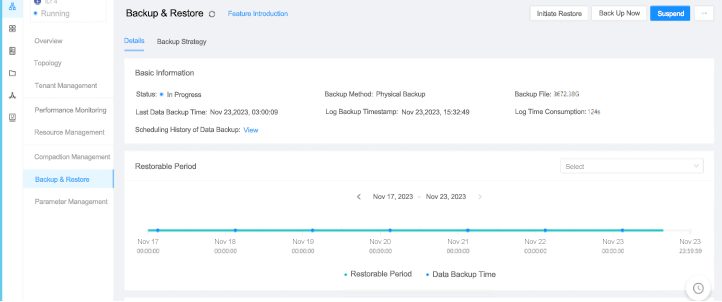
<style>
.page{position:relative;width:722px;height:302px;background:#ffffff}
.page>*{position:absolute;margin:0}
.t1{font:8px "ArialMT";letter-spacing:-0.02em;color:#bebebe}
.t2{font:10px "ArialMT";letter-spacing:-0.02em;color:#151515}
.t3{font:7px "ArialMT";letter-spacing:-0.02em;color:#56acf9}
.t4{font:7px "ArialMT";letter-spacing:-0.02em;color:#747474}
.t5{font:7px "ArialMT";letter-spacing:-0.02em;color:#ffffff}
.t6{font:7px "ArialMT";letter-spacing:-0.02em;color:#abaaaa}
.t7{font:8px "ArialMT";letter-spacing:-0.02em;color:#747474}
.t8{font:7px "ArialMT";letter-spacing:-0.02em;color:#9b9b9b}
.t9{font:7px "ArialMT";letter-spacing:-0.03em;color:#abaaaa}
.t10{font:7px "ArialMT";letter-spacing:-0.02em}
.t11{font:7px "ArialMT";letter-spacing:-0.02em;color:#7f7d7d}
</style>
<div class="page">
<p class="t1" style="left:41px;top:10px;width:29px;height:8px">Running</p>
<p class="t2" style="left:126px;top:9px;width:78px;height:10px">Backup &amp; Restore</p>
<p class="t3" style="left:228px;top:10px;width:60px;height:7px">Feature Introduction</p>
<p class="t4" style="left:537px;top:10px;width:45px;height:7px">Initiate Restore</p>
<p class="t4" style="left:599px;top:10px;width:41px;height:7px">Back Up Now</p>
<p class="t5" style="left:657px;top:10px;width:27px;height:8px">Suspend</p>
<p class="t6" style="left:34px;top:38px;width:29px;height:6px">Overview</p>
<p class="t3" style="left:124px;top:37px;width:21px;height:7px">Details</p>
<p class="t4" style="left:157px;top:38px;width:50px;height:8px">Backup Strategy</p>
<p class="t6" style="left:33px;top:60px;width:29px;height:7px">Topology</p>
<p class="t7" style="left:135px;top:69px;width:59px;height:7px">Basic Information</p>
<p class="t6" style="left:34px;top:82px;width:64px;height:8px">Tenant Management</p>
<p class="t4" style="left:136px;top:91px;width:21px;height:6px">Status:</p>
<p class="t4" style="left:167px;top:91px;width:35px;height:8px">In Progress</p>
<p class="t4" style="left:325px;top:91px;width:48px;height:7px">Backup Method:</p>
<p class="t4" style="left:376px;top:91px;width:50px;height:7px">Physical Backup</p>
<p class="t4" style="left:515px;top:91px;width:36px;height:7px">Backup File:</p>
<p class="t8" style="left:35px;top:107px;width:72px;height:7px">Performance Monitoring</p>
<p class="t4" style="left:136px;top:109px;width:71px;height:7px">Last Data Backup Time:</p>
<p class="t4" style="left:210px;top:109px;width:68px;height:7px">Nov 23,2023, 03:00:09</p>
<p class="t4" style="left:326px;top:108px;width:72px;height:8px">Log Backup Timestamp:</p>
<p class="t4" style="left:402px;top:109px;width:68px;height:7px">Nov 23,2023, 15:32:49</p>
<p class="t4" style="left:515px;top:108px;width:71px;height:8px">Log Time Consumption:</p>
<p class="t4" style="left:135px;top:126px;width:105px;height:8px">Scheduling History of Data Backup:</p>
<p class="t6" style="left:34px;top:129px;width:71px;height:8px">Resource Management</p>
<p class="t3" style="left:243px;top:127px;width:16px;height:6px">View</p>
<p class="t9" style="left:34px;top:154px;width:77px;height:7px">Compaction Management</p>
<p class="t7" style="left:135px;top:163px;width:61px;height:7px">Restorable Period</p>
<p class="t10" style="left:565px;top:164px;width:19px;height:5px">Select</p>
<p class="t3" style="left:35px;top:176px;width:55px;height:8px">Backup &amp; Restore</p>
<p class="t6" style="left:35px;top:198px;width:73px;height:8px">Parameter Management</p>
<p class="t11" style="left:373px;top:193px;width:40px;height:7px">Nov 17, 2023</p>
<p class="t11" style="left:426px;top:193px;width:40px;height:7px">Nov 23, 2023</p>
<p class="t11" style="left:138px;top:239px;width:21px;height:5px">Nov 17</p>
<p class="t11" style="left:215px;top:239px;width:21px;height:5px">Nov 18</p>
<p class="t11" style="left:293px;top:239px;width:21px;height:5px">Nov 19</p>
<p class="t11" style="left:370px;top:239px;width:21px;height:5px">Nov 20</p>
<p class="t11" style="left:448px;top:239px;width:20px;height:5px">Nov 21</p>
<p class="t11" style="left:525px;top:239px;width:21px;height:5px">Nov 22</p>
<p class="t11" style="left:603px;top:239px;width:21px;height:5px">Nov 23</p>
<p class="t11" style="left:680px;top:239px;width:21px;height:5px">Nov 23</p>
<p class="t7" style="left:351px;top:270px;width:61px;height:7px">Restorable Period</p>
<p class="t7" style="left:433px;top:271px;width:63px;height:8px">Data Backup Time</p>
</div>
